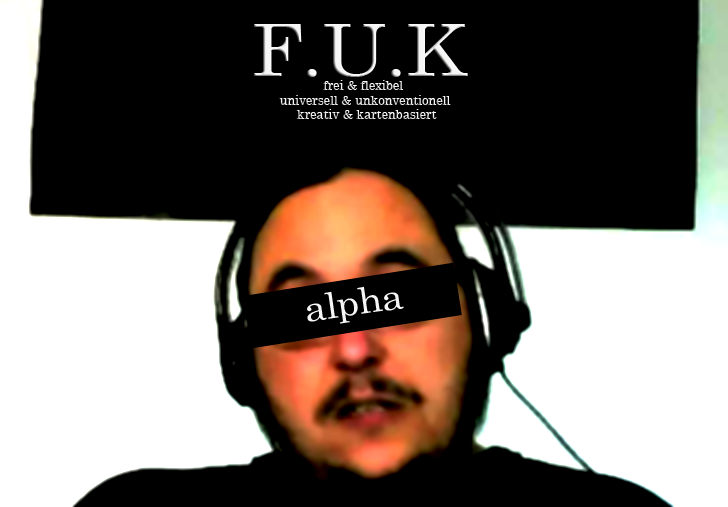
<style>
.page{position:relative;width:728px;height:507px;background:#000000}
.page>*{position:absolute;margin:0}
.t1{font:12px "CenturySchoolbook";letter-spacing:-0.02em;color:#f6f6f6;scale:1.1 1}
.t2{font:72px "CenturySchoolbook";letter-spacing:-0.02em;color:#f6f6f6;scale:1.1 1}
.t3{font:36px "CenturySchoolbook";letter-spacing:-0.02em;color:#f6f6f6;scale:1.1 1}
</style>
<div class="page">
<p class="t1" style="left:254px;top:24px;width:214px;height:95px;text-align:center"><span class="t2">F.U.K <br></span>frei &amp; flexibel <br>universell &amp; unkonventionell<br> kreativ &amp; kartenbasiert</p>
<p class="t3" style="left:307px;top:286px;width:97px;height:38px;rotate:-8deg">alpha</p>
</div>
